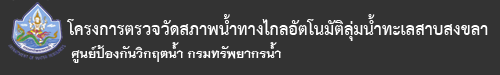
<style>
.page{position:relative;width:500px;height:75px;background:#333333}
.page>*{position:absolute;margin:0}
.t1{font:24px "THSarabunNew-Bold";color:#ffffff}
.t2{font:18px "THNiramitAS-Bold";color:#ffffff}
</style>
<div class="page">
<p class="t1" style="left:67px;top:14px;width:421px;height:27px">โครงการตรวจวัดสภาพน้ำทางไกลอัตโนมัติลุ่มน้ำทะเลสาบสงขลา</p>
<p class="t2" style="left:71px;top:42px;width:210px;height:21px">ศูนย์ป้องกันวิกฤตน้ำ กรมทรัพยากรน้ำ</p>
</div>
